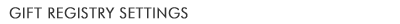
<style>
.page{position:relative;width:400px;height:24px;background:#ffffff}
.page>*{position:absolute;margin:0}
.t1{font:14.7px "FuturaBT-Light";letter-spacing:0.025em;color:#363636;text-transform:uppercase;font-weight:bold}
</style>
<div class="page">
<p class="t1" style="left:9px;top:7px;width:179px;height:12px">gift registry settings</p>
</div>
